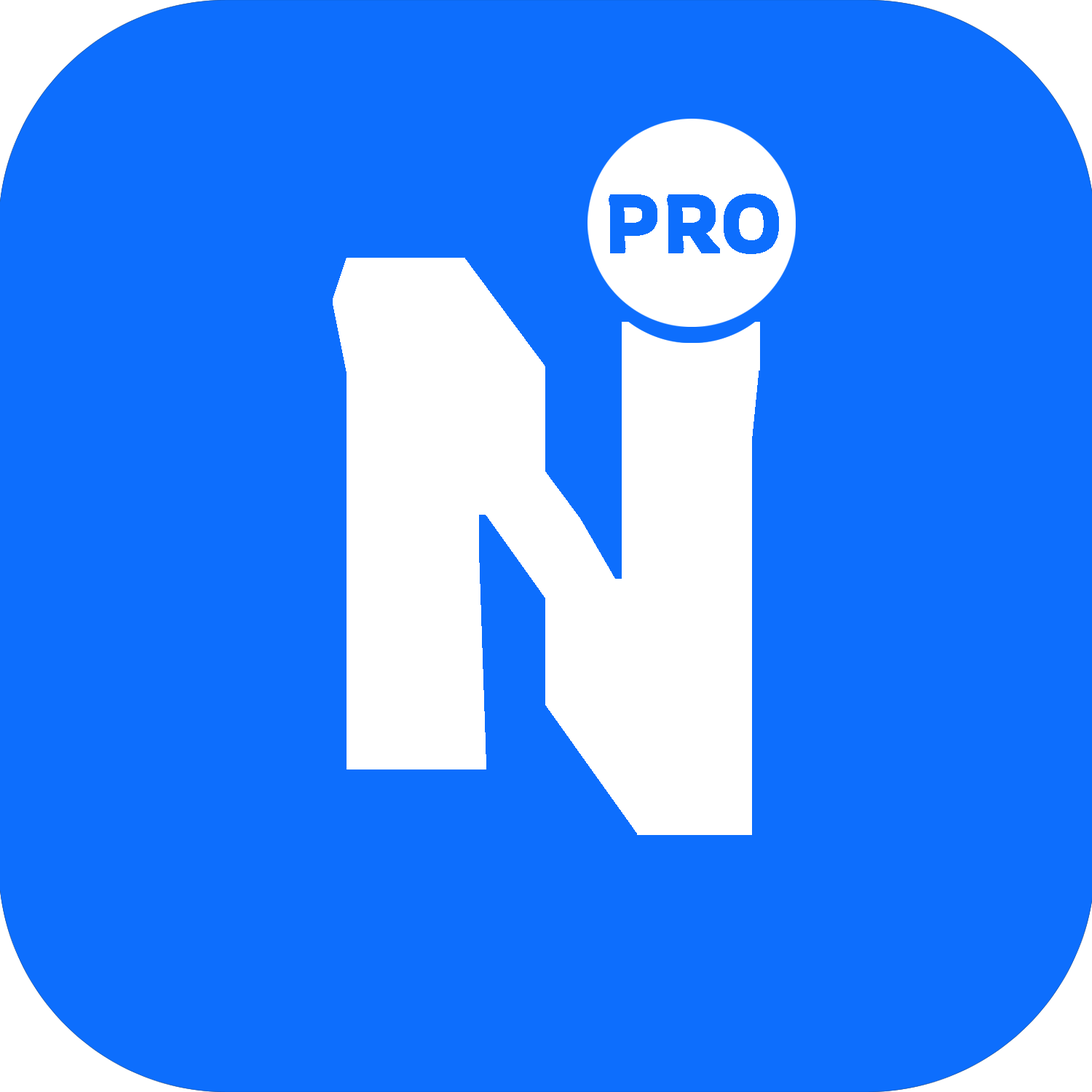
<style>
.page{position:relative;width:1092px;height:1092px;background:#0d6efd}
.page>*{position:absolute;margin:0}
.t1{font:82.3px "Rowdies-Regular";color:#0d6efd}
</style>
<div class="page">
<p class="t1" style="left:609px;top:194px;width:170px;height:60px">PRO</p>
</div>
